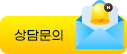
<style>
.page{position:relative;width:127px;height:54px;background:#ffffff}
.page>*{position:absolute;margin:0}
.t1{font:3.7px "GmarketSansTTFBold";letter-spacing:0.04em;color:#ffffff}
.t2{font:13px "GmarketSansTTFMedium";color:#001b33}
</style>
<div class="page">
<p class="t1" style="left:107px;top:6px;width:3px;height:3px">N</p>
<p class="t2" style="left:14px;top:29px;width:49px;height:12px">상담문의</p>
</div>
